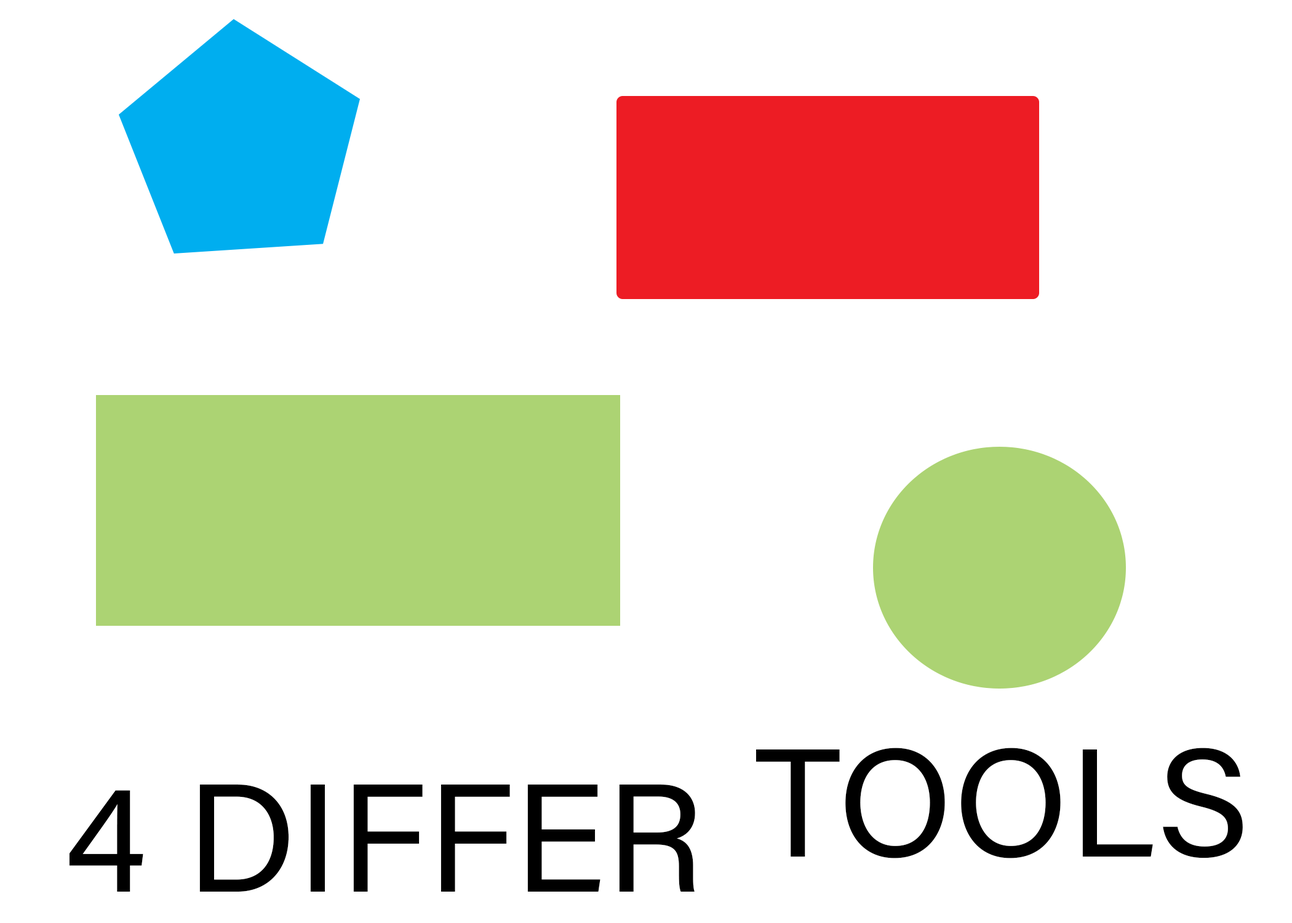
<style>
.page{position:relative;width:1292px;height:923px;background:#ffffff}
.page>*{position:absolute;margin:0}
.t1{font:153.8px "AcuminConcept-Regular";color:#000000}
</style>
<div class="page">
<p class="t1" style="left:756px;top:748px;width:487px;height:110px">TOOLS</p>
<p class="t1" style="left:69px;top:784px;width:626px;height:108px">4 DIFFER</p>
</div>
